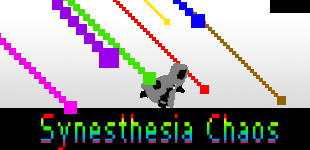
<style>
.page{position:relative;width:310px;height:150px;background:#000000}
.page>*{position:absolute;margin:0}
.t1{font:53.3px "Photoshop Small";letter-spacing:0.04em}
</style>
<div class="page">
<p class="t1" style="left:41px;top:113px;width:237px;height:39px">Synesthesia Chaos</p>
</div>
